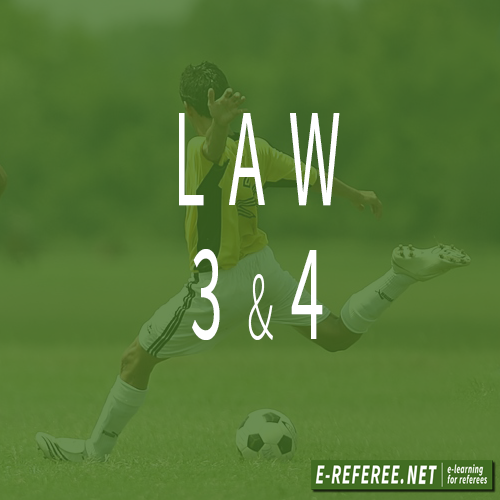
<style>
.page{position:relative;width:500px;height:500px}
.page>*{position:absolute;margin:0}
.t1{font:139.5px/134.2px "SourceSansPro-Regular";letter-spacing:0.36em;color:#ffffff;scale:0.48 1}
.t2{font:97.7px/134.2px "SourceSansPro-Light";letter-spacing:0.36em;color:#ffffff;scale:0.48 1}
</style>
<div class="page">
<p class="t1" style="left:179px;top:113px;width:161px;height:227px;text-align:center">LAW<br>3<span class="t2">&amp;</span>4</p>
</div>
